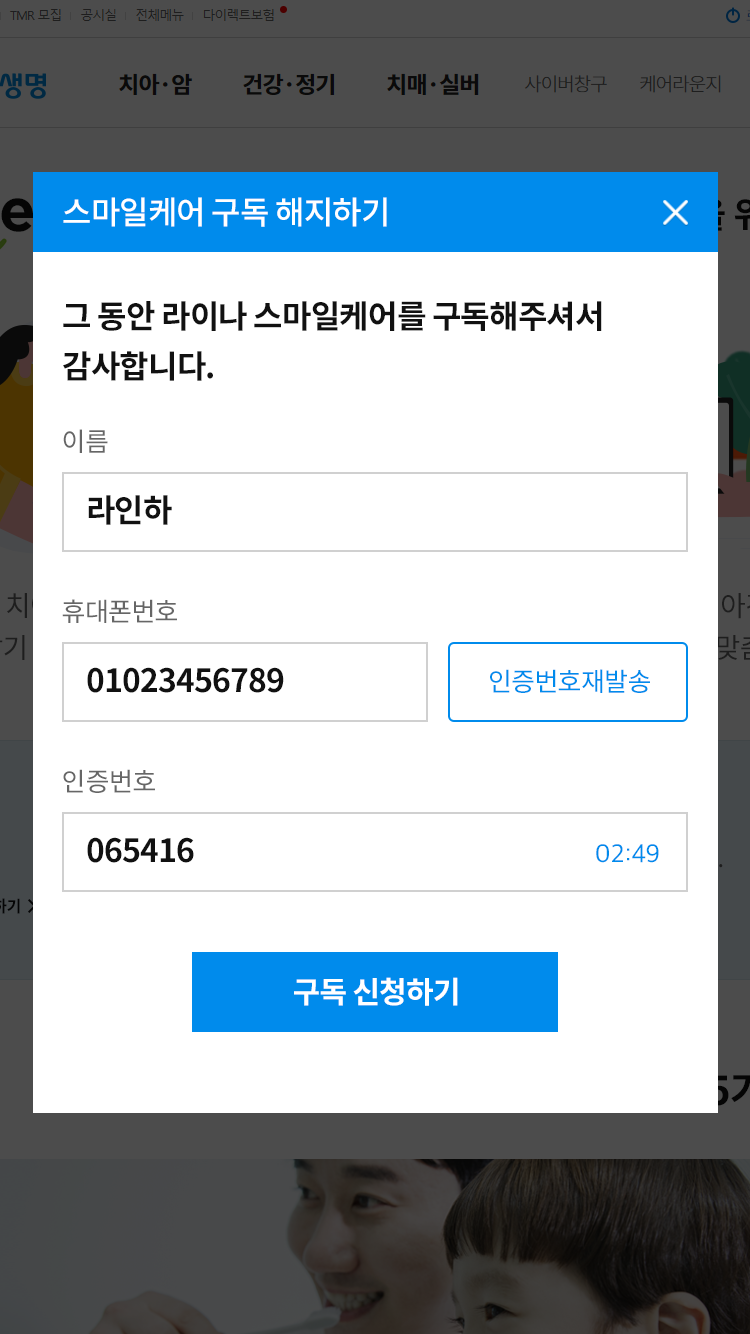
<style>
.page{position:relative;width:750px;height:1334px;background:#ffffff}
.page>*{position:absolute;margin:0}
.t1{font:32px "NotoSansCJKkr-Medium";letter-spacing:-0.025em;color:#ffffff}
.t2{font:32px/50px "NotoSansCJKkr-Bold";letter-spacing:-0.025em;color:#111111}
.t3{font:26px/170px "NotoSansCJKkr-Regular";letter-spacing:-0.025em;color:#666666}
.t4{font:26px/170px "NotoSansCJKkr-Regular";letter-spacing:-0.01em;color:#666666}
.t5{font:32px/170px "NotoSansCJKkr-Bold";letter-spacing:-0.025em;color:#111111}
.t6{font:26px "NotoSansCJKkr-Regular";letter-spacing:-0.025em;color:#008bec}
.t7{font:26px "AppleSDGothicNeoR00";letter-spacing:-0.01em;color:#008bec}
.t8{font:30px "NotoSansCJKkr-Bold";letter-spacing:-0.025em;color:#ffffff}
</style>
<div class="page">
<p class="t1" style="left:63px;top:197px;width:324px;height:30px">스마일케어 구독 해지하기</p>
<p class="t2" style="left:63px;top:301px;width:539px;height:80px">그 동안 라이나 스마일케어를 구독해주셔서 <br>감사합니다.</p>
<p class="t3" style="left:62px;top:429px;width:115px;height:364px">이름<br>휴대폰번호<span class="t4"><br>인증번호</span></p>
<p class="t5" style="left:87px;top:495px;width:197px;height:368px">라인하<br>01023456789<br>065416</p>
<p class="t6" style="left:490px;top:669px;width:160px;height:24px">인증번호재발송</p>
<p class="t7" style="left:596px;top:844px;width:63px;height:19px">02:49</p>
<p class="t8" style="left:294px;top:977px;width:164px;height:29px">구독 신청하기</p>
</div>
